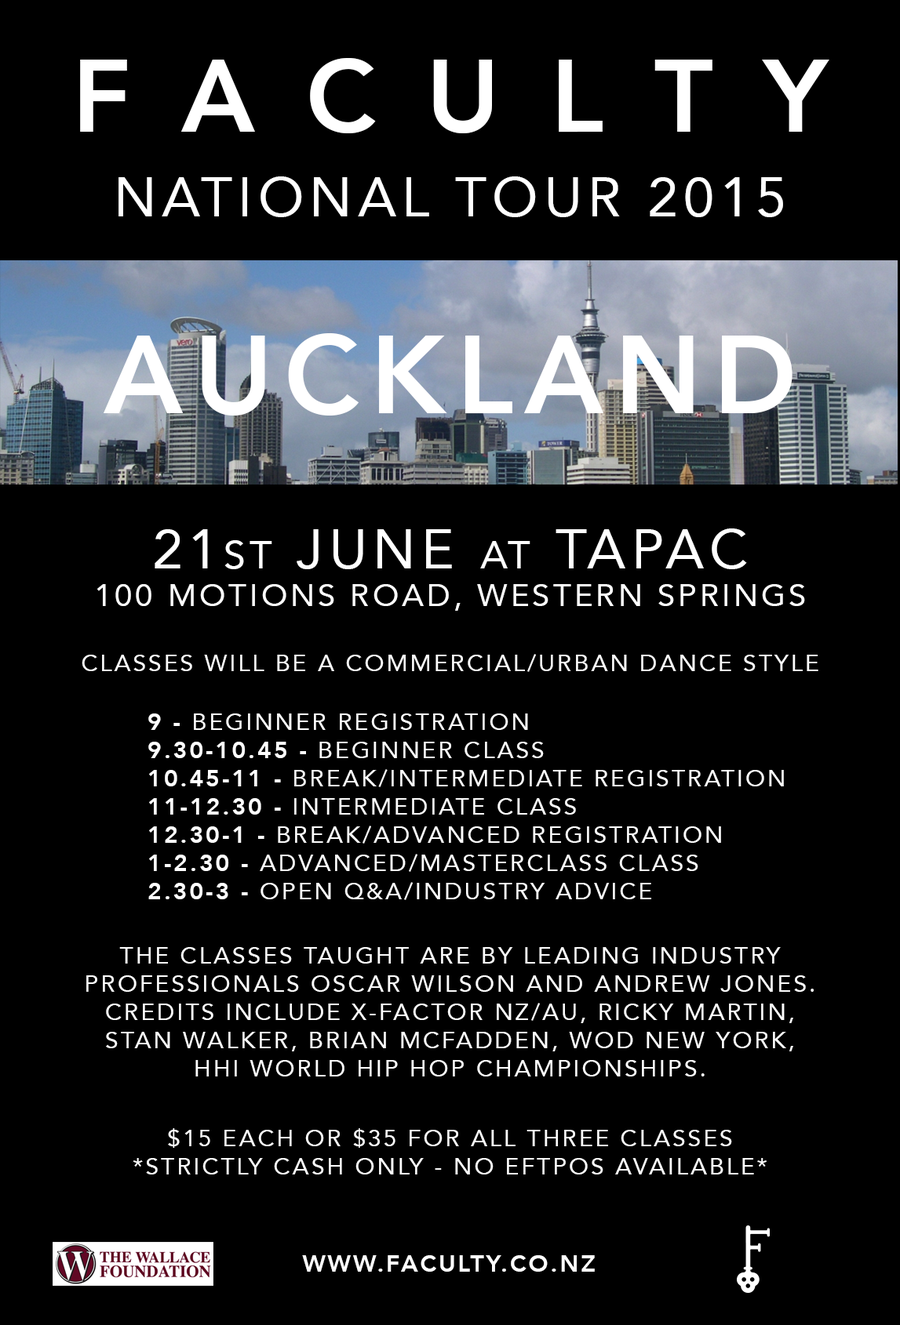
<style>
.page{position:relative;width:900px;height:1325px;background:#000000}
.page>*{position:absolute;margin:0}
.t1{font:102px "Avenir-Heavy";letter-spacing:0.1em;color:#ffffff}
.t2{font:54.9px "Avenir-Roman";letter-spacing:0.1em;color:#ffffff}
.t3{font:109.8px "Avenir-Heavy";letter-spacing:0.1em;color:#ffffff}
.t4{font:31.4px "Avenir-Roman";letter-spacing:0.1em;color:#ffffff}
.t5{font:39.2px "Avenir-Roman";letter-spacing:0.1em;color:#ffffff}
.t6{font:23.5px "Avenir-Roman";letter-spacing:0.1em;color:#ffffff}
.t7{font:23.5px "Avenir-Heavy";letter-spacing:0.1em;color:#ffffff}
</style>
<div class="page">
<p class="t1" style="left:80px;top:58px;width:749px;height:75px">F A C U L T Y</p>
<p class="t2" style="left:118px;top:176px;width:665px;height:41px">NATIONAL TOUR 2015</p>
<p class="t3" style="left:104px;top:333px;width:688px;height:83px">AUCKLAND</p>
<p class="t4" style="left:96px;top:529px;width:709px;height:82px;text-align:center"><span class="t2">21</span><span class="t5">ST</span><span class="t2"> JUNE </span><span class="t5">AT</span><span class="t2"> TAPAC <br></span>100 MOTIONS ROAD, WESTERN SPRINGS</p>
<p class="t6" style="left:82px;top:654px;width:736px;height:18px">CLASSES WILL BE A COMMERCIAL/URBAN DANCE STYLE</p>
<p class="t6" style="left:148px;top:714px;width:636px;height:186px"><span class="t7">9 -</span> BEGINNER REGISTRATION<br><span class="t7">9.30-10.45 -</span> BEGINNER CLASS<br><span class="t7">10.45-11 -</span> BREAK/INTERMEDIATE REGISTRATION<br><span class="t7">11-12.30 -</span> INTERMEDIATE CLASS<br><span class="t7">12.30-1 -</span> BREAK/ADVANCED REGISTRATION<br><span class="t7">1-2.30 -</span> ADVANCED/MASTERCLASS CLASS<br><span class="t7">2.30-3 -</span> OPEN Q&amp;A/INDUSTRY ADVICE</p>
<p class="t6" style="left:86px;top:947px;width:727px;height:130px;text-align:center">THE CLASSES TAUGHT ARE BY LEADING INDUSTRY <br>PROFESSIONALS OSCAR WILSON AND ANDREW JONES.<br>CREDITS INCLUDE X-FACTOR NZ/AU, RICKY MARTIN,<br>STAN WALKER, BRIAN MCFADDEN, WOD NEW YORK,<br>HHI WORLD HIP HOP CHAMPIONSHIPS.</p>
<p class="t6" style="left:133px;top:1129px;width:633px;height:46px;text-align:center">$15 EACH OR $35 FOR ALL THREE CLASSES<br>*STRICTLY CASH ONLY - NO EFTPOS AVAILABLE*</p>
<p class="t7" style="left:302px;top:1256px;width:293px;height:16px">WWW.FACULTY.CO.NZ</p>
</div>
